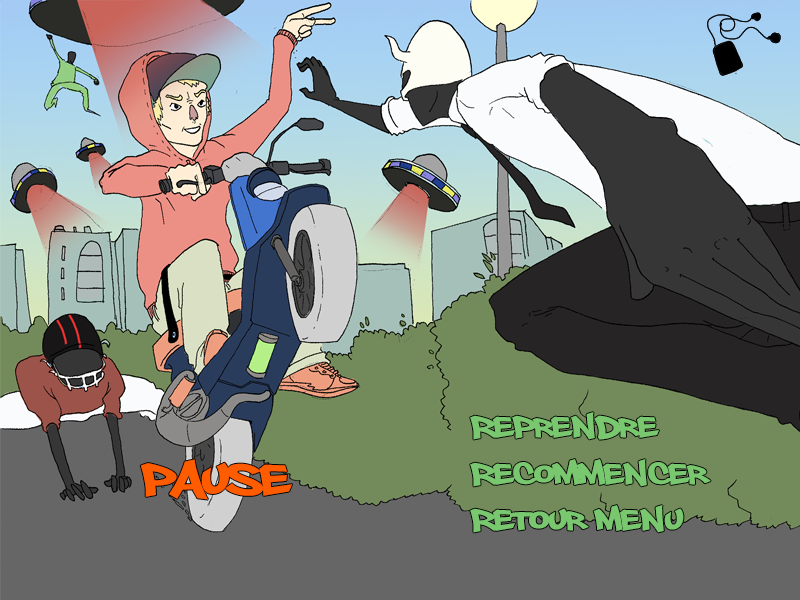
<style>
.page{position:relative;width:800px;height:600px}
.page>*{position:absolute;margin:0}
.t1{font:41.7px "PhillySans";color:#79c76f}
.t2{font:61.7px "PhillySans";color:#ff5c00}
</style>
<div class="page">
<p class="t1" style="left:470px;top:412px;width:189px;height:28px">Reprendre</p>
<p class="t2" style="left:140px;top:459px;width:152px;height:41px">Pause</p>
<p class="t1" style="left:470px;top:459px;width:241px;height:28px">Recommencer</p>
<p class="t1" style="left:470px;top:505px;width:214px;height:28px">Retour menu</p>
</div>
